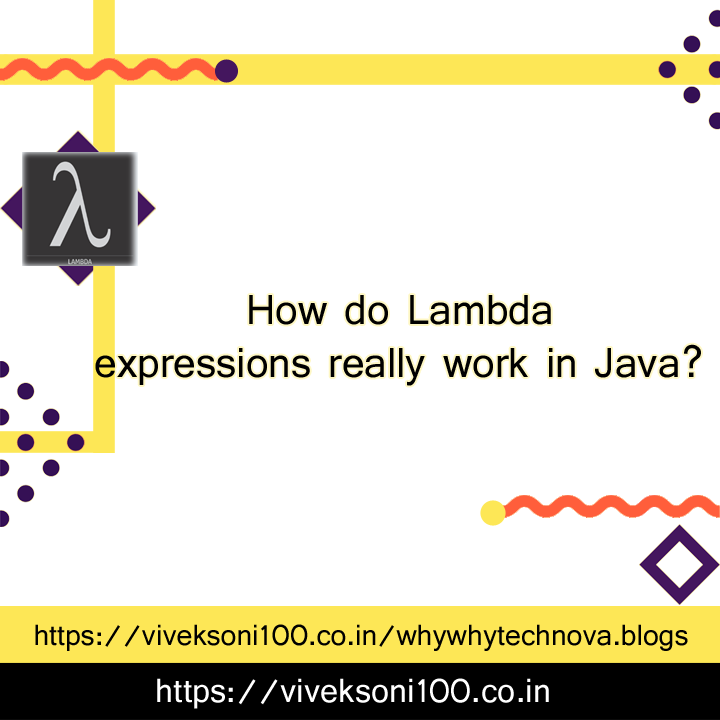
<style>
.page{position:relative;width:720px;height:720px;background:#ffffff}
.page>*{position:absolute;margin:0}
.t1{font:44px "Shruti";color:#000000}
.t2{font:30.7px "Shruti";color:#000000}
.t3{font:35.3px "Shruti";color:#ffffff}
</style>
<div class="page">
<p class="t1" style="left:95px;top:295px;width:606px;height:91px;text-align:center">How do Lambda<br>expressions really work in Java?</p>
<p class="t2" style="left:35px;top:624px;width:653px;height:27px">https://viveksoni100.co.in/whywhytechnova.blogs</p>
<p class="t3" style="left:157px;top:678px;width:392px;height:31px">https://viveksoni100.co.in</p>
</div>
